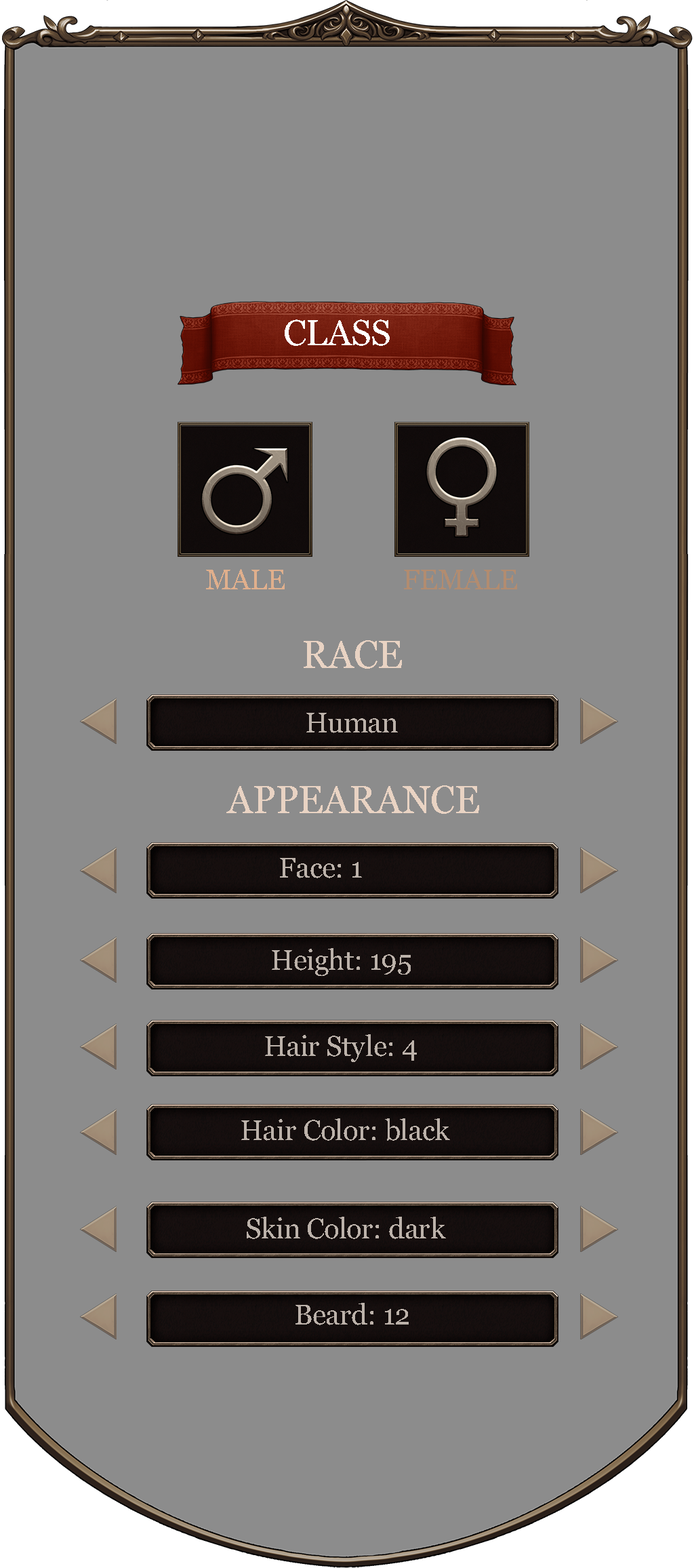
<style>
.page{position:relative;width:694px;height:1568px;background:#8c8c8c}
.page>*{position:absolute;margin:0}
.t1{font:35.8px "Georgia";color:#ffffff}
.t2{font:28.2px "Georgia";color:#e0af8c}
.t3{font:28.2px "Georgia";color:#b28c70}
.t4{font:38.3px "Georgia";color:#e9d3c3}
.t5{font:28.2px "Georgia";color:#bcb2aa}
</style>
<div class="page">
<p class="t1" style="left:285px;top:319px;width:105px;height:27px">CLASS</p>
<p class="t2" style="left:206px;top:569px;width:79px;height:20px">MALE</p>
<p class="t3" style="left:404px;top:569px;width:113px;height:20px">FEMALE</p>
<p class="t4" style="left:304px;top:640px;width:98px;height:29px">RACE</p>
<p class="t5" style="left:307px;top:713px;width:91px;height:20px">Human</p>
<p class="t4" style="left:227px;top:785px;width:252px;height:29px">APPEARANCE</p>
<p class="t5" style="left:280px;top:858px;width:82px;height:20px">Face: 1</p>
<p class="t5" style="left:272px;top:948px;width:139px;height:28px">Height: 195</p>
<p class="t5" style="left:265px;top:1034px;width:152px;height:28px">Hair Style: 4</p>
<p class="t5" style="left:241px;top:1118px;width:209px;height:23px">Hair Color: black</p>
<p class="t5" style="left:247px;top:1217px;width:199px;height:22px">Skin Color: dark</p>
<p class="t5" style="left:296px;top:1303px;width:113px;height:22px">Beard: 12</p>
</div>
